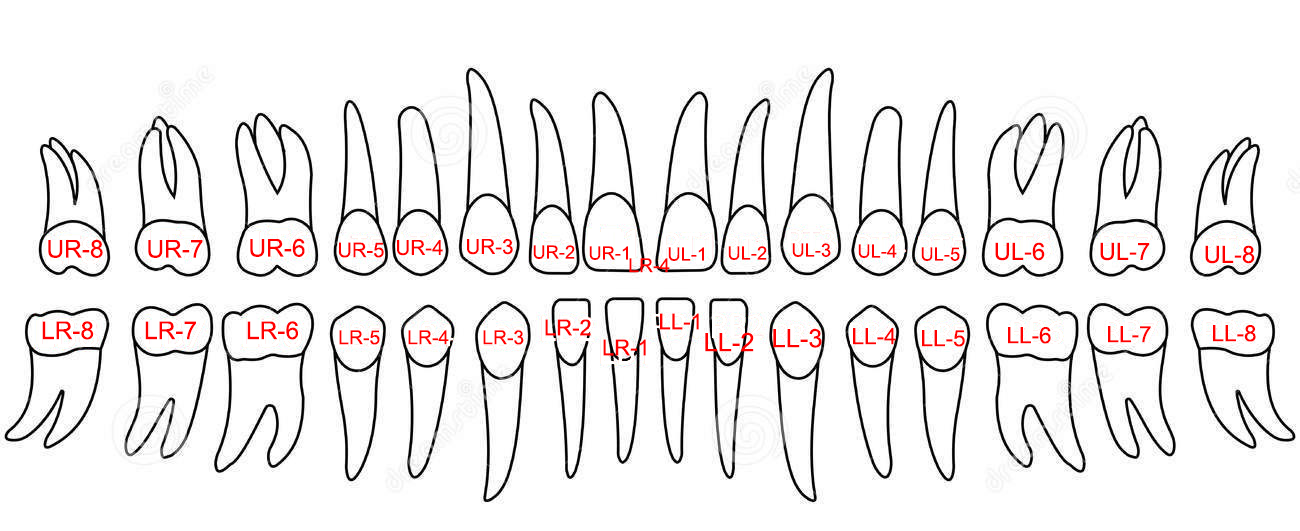
<style>
.page{position:relative;width:1300px;height:531px;background:#ffffff}
.page>*{position:absolute;margin:0}
.t1{font:24.5px "ArialMT";color:#ff0000}
.t2{font:20.1px "ArialMT";color:#ff0000}
.t3{font:20.6px "ArialMT";color:#ff0000}
.t4{font:18.3px "ArialMT";color:#ff0000}
.t5{font:23.7px "ArialMT";color:#ff0000}
.t6{font:19.4px "ArialMT";color:#ff0000}
.t7{font:22px "ArialMT";color:#ff0000}
.t8{font:25.5px "ArialMT";color:#ff0000}
.t9{font:22.5px "ArialMT";color:#ff0000}
</style>
<div class="page">
<p class="t1" style="left:48px;top:239px;width:55px;height:19px">UR-8</p>
<p class="t1" style="left:148px;top:240px;width:55px;height:18px">UR-7</p>
<p class="t1" style="left:250px;top:238px;width:55px;height:19px">UR-6</p>
<p class="t2" style="left:339px;top:242px;width:45px;height:16px">UR-5</p>
<p class="t3" style="left:397px;top:240px;width:46px;height:16px">UR-4</p>
<p class="t3" style="left:467px;top:239px;width:46px;height:16px">UR-3</p>
<p class="t4" style="left:533px;top:245px;width:42px;height:14px">UR-2</p>
<p class="t4" style="left:589px;top:246px;width:39px;height:14px">UR-1</p>
<p class="t4" style="left:728px;top:246px;width:39px;height:14px">UL-2</p>
<p class="t4" style="left:792px;top:243px;width:39px;height:14px">UL-3</p>
<p class="t4" style="left:858px;top:244px;width:39px;height:14px">UL-4</p>
<p class="t5" style="left:995px;top:242px;width:50px;height:19px">UL-6</p>
<p class="t5" style="left:1100px;top:242px;width:50px;height:19px">UL-7</p>
<p class="t5" style="left:1205px;top:245px;width:50px;height:19px">UL-8</p>
<p class="t4" style="left:668px;top:247px;width:36px;height:14px">UL-1</p>
<p class="t4" style="left:921px;top:247px;width:39px;height:14px">UL-5</p>
<p class="t6" style="left:629px;top:258px;width:41px;height:15px">LR-4</p>
<p class="t7" style="left:660px;top:313px;width:39px;height:17px">LL-1</p>
<p class="t1" style="left:42px;top:321px;width:52px;height:19px">LR-8</p>
<p class="t1" style="left:145px;top:321px;width:51px;height:19px">LR-7</p>
<p class="t1" style="left:247px;top:321px;width:51px;height:19px">LR-6</p>
<p class="t7" style="left:545px;top:319px;width:46px;height:17px">LR-2</p>
<p class="t8" style="left:773px;top:328px;width:49px;height:20px">LL-3</p>
<p class="t9" style="left:853px;top:328px;width:43px;height:17px">LL-4</p>
<p class="t9" style="left:1008px;top:327px;width:43px;height:17px">LL-6</p>
<p class="t9" style="left:1108px;top:326px;width:43px;height:17px">LL-7</p>
<p class="t9" style="left:1213px;top:325px;width:43px;height:17px">LL-8</p>
<p class="t6" style="left:339px;top:330px;width:41px;height:15px">LR-5</p>
<p class="t6" style="left:408px;top:330px;width:41px;height:15px">LR-4</p>
<p class="t6" style="left:483px;top:330px;width:41px;height:15px">LR-3</p>
<p class="t7" style="left:603px;top:339px;width:43px;height:17px">LR-1</p>
<p class="t8" style="left:705px;top:332px;width:49px;height:20px">LL-2</p>
<p class="t9" style="left:922px;top:330px;width:43px;height:17px">LL-5</p>
</div>
